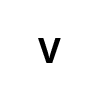
<style>
.page{position:relative;width:100px;height:100px;background:#ffffff}
.page>*{position:absolute;margin:0}
.t1{font:35px "OpenSans-Bold";color:#000000}
</style>
<div class="page">
<p class="t1" style="left:38px;top:38px;width:23px;height:25px">V</p>
</div>
